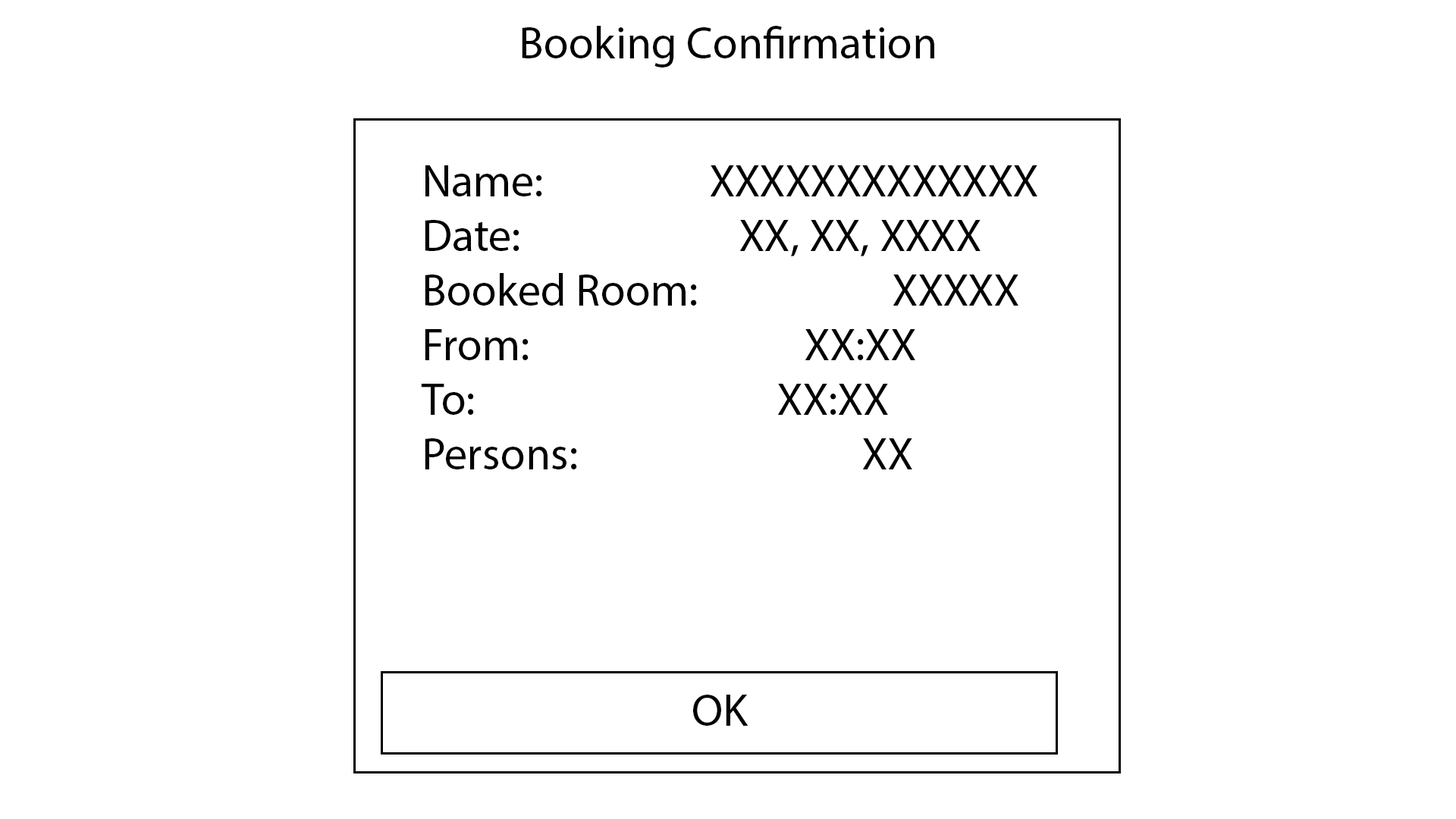
<style>
.page{position:relative;width:1456px;height:819px;background:#ffffff}
.page>*{position:absolute;margin:0}
.t1{font:45.5px "MyriadPro-Regular";color:#000000}
</style>
<div class="page">
<p class="t1" style="left:522px;top:26px;width:412px;height:41px">Booking Confirmation</p>
<p class="t1" style="left:421px;top:165px;width:616px;height:304px;text-align:center">Name: XXXXXXXXXXXXX<br>Date: XX, XX, XXXX<br>Booked Room: XXXXX<br>From: XX:XX<br>To: XX:XX<br>Persons: XX</p>
<p class="t1" style="left:693px;top:695px;width:55px;height:31px">OK</p>
</div>
